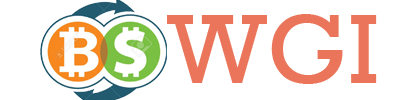
<style>
.page{position:relative;width:420px;height:100px;background:#ffffff}
.page>*{position:absolute;margin:0}
.t1{font:100px "Rockwell";color:#ea755a}
</style>
<div class="page">
<p class="t1" style="left:167px;top:14px;width:210px;height:70px">WGI</p>
</div>
